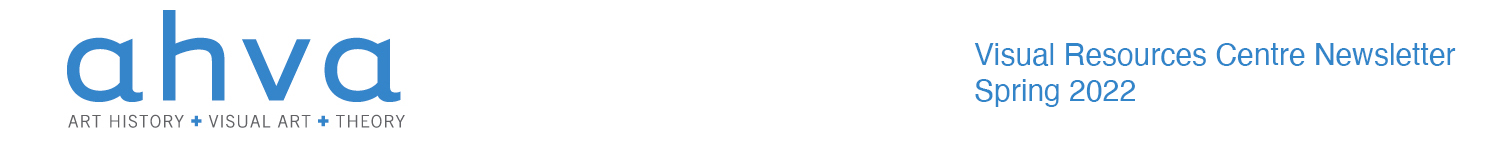
<style>
.page{position:relative;width:1500px;height:149px;background:#ffffff}
.page>*{position:absolute;margin:0}
.t1{font:30px "Helvetica";color:#3285c9}
</style>
<div class="page">
<p class="t1" style="left:974px;top:43px;width:482px;height:64px">Visual Resources Centre Newsletter<br>Spring 2022</p>
</div>
